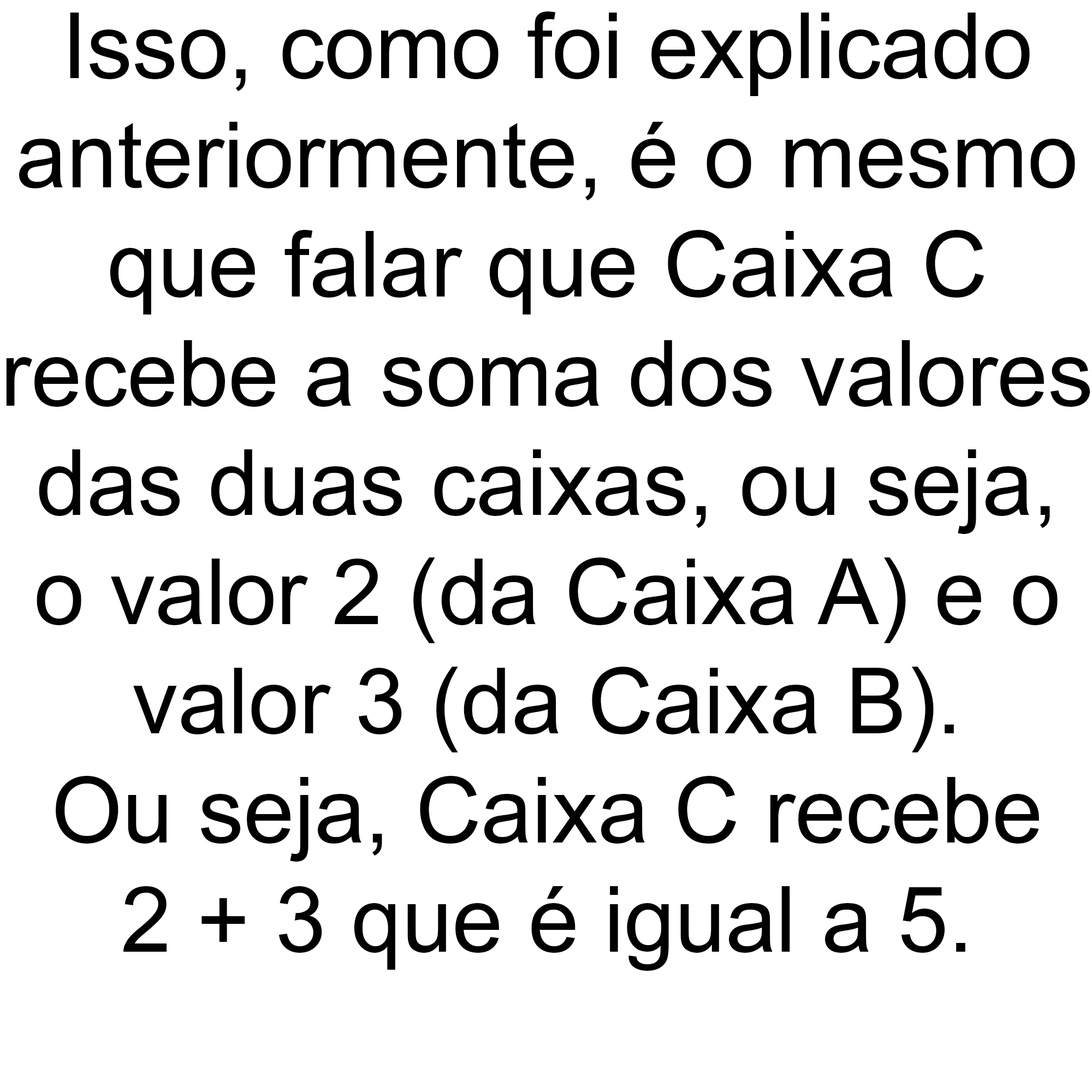
<style>
.page{position:relative;width:1092px;height:1092px;background:#ffffff}
.page>*{position:absolute;margin:0}
.t1{font:91px "ArialMT";color:#000000}
</style>
<div class="page">
<p class="t1" style="left:6px;top:11px;width:1084px;height:960px;text-align:center">Isso, como foi explicado<br>anteriormente, é o mesmo<br>que falar que Caixa C<br>recebe a soma dos valores<br>das duas caixas, ou seja,<br>o valor 2 (da Caixa A) e o<br>valor 3 (da Caixa B).<br>Ou seja, Caixa C recebe<br>2 + 3 que é igual a 5.</p>
</div>
